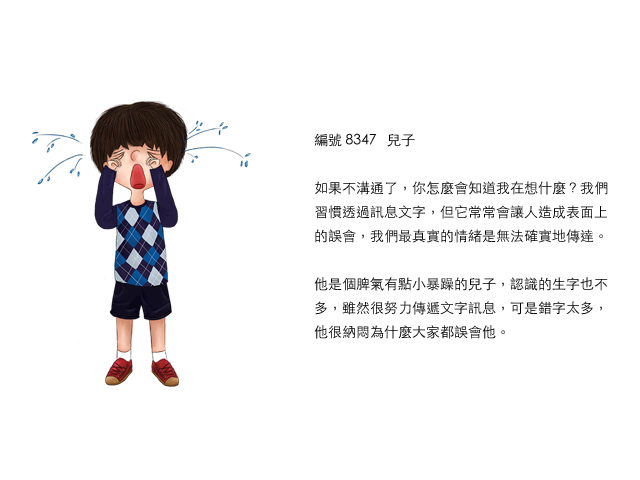
<style>
.page{position:relative;width:640px;height:480px;background:#ffffff}
.page>*{position:absolute;margin:0}
.t1{font:14px/24px "STHeitiTC-Light";color:#000000}
</style>
<div class="page">
<p class="t1" style="left:314px;top:133px;width:294px;height:206px">編號 8347   兒子<br><br>如果不溝通了，你怎麼會知道我在想什麼？我們習慣透過訊息文字，但它常常會讓人造成表面上的誤會，我們最真實的情緒是無法確實地傳達。<br><br>他是個脾氣有點小暴躁的兒子，認識的生字也不多，雖然很努力傳遞文字訊息，可是錯字太多，他很納悶為什麼大家都誤會他。</p>
</div>
